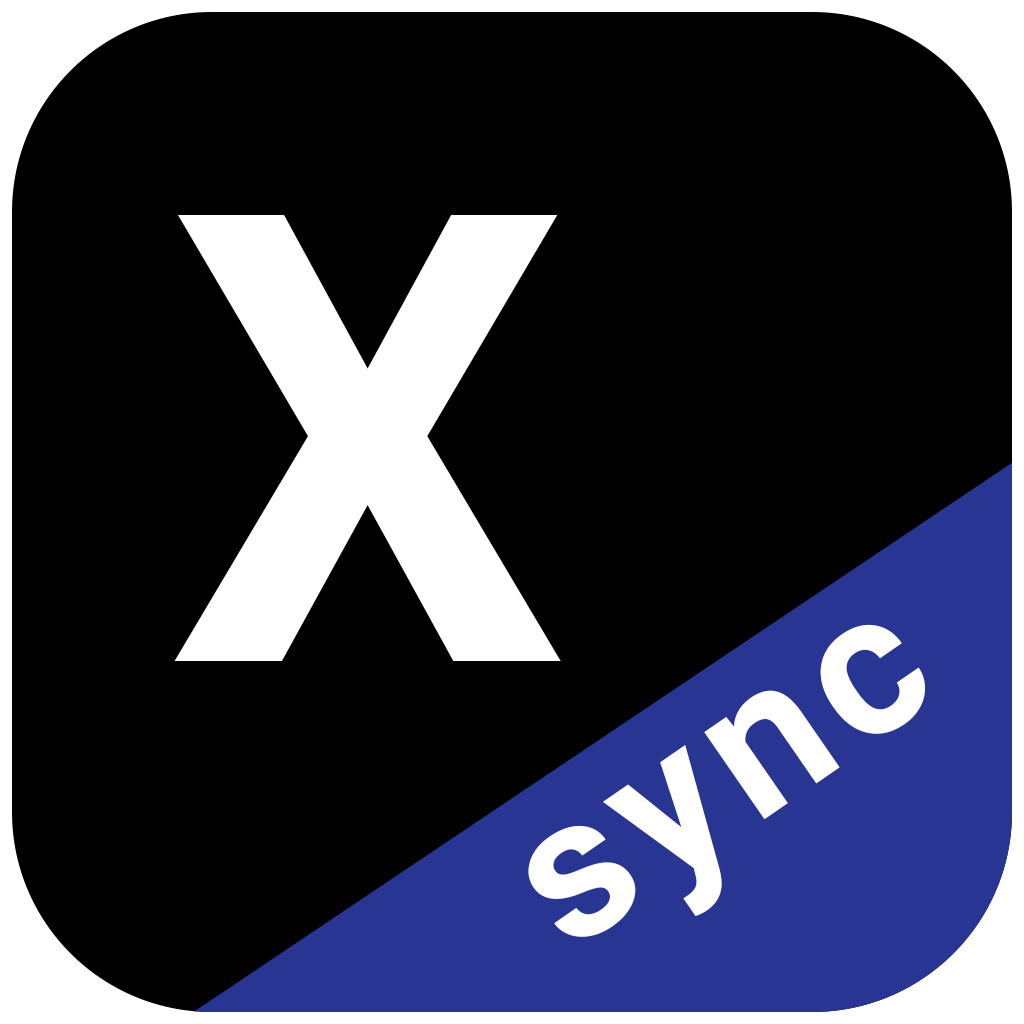
<style>
.page{position:relative;width:1024px;height:1024px;background:#000000}
.page>*{position:absolute;margin:0}
.t1{font:628.2px "Roboto-Bold";letter-spacing:0.06em;color:#ffffff}
.t2{font:200px "Roboto-Bold";letter-spacing:0.06em;color:#ffffff}
</style>
<div class="page">
<p class="t1" style="left:174px;top:215px;width:387px;height:446px">X</p>
<p class="t2" style="left:528px;top:624px;width:397px;height:313px;rotate:-35deg">sync</p>
</div>
